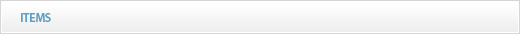
<style>
.page{position:relative;width:520px;height:34px}
.page>*{position:absolute;margin:0}
.t1{font:12px "MyriadPro-Semibold";letter-spacing:-0.01em;color:#5ca0c7;text-transform:uppercase}
</style>
<div class="page">
<p class="t1" style="left:21px;top:13px;width:30px;height:9px">ITEMS</p>
</div>
